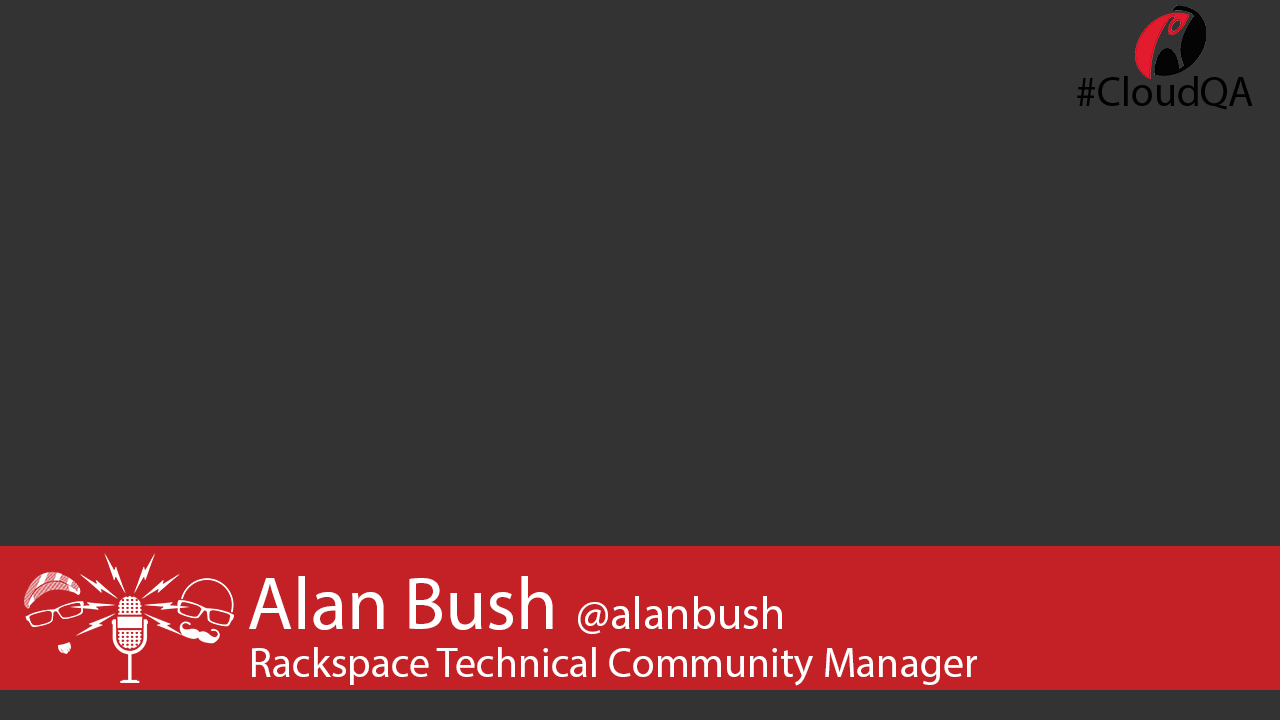
<style>
.page{position:relative;width:1280px;height:720px;background:#333333}
.page>*{position:absolute;margin:0}
.t1{font:41.7px "MyriadPro-Regular";color:#000000}
.t2{font:75px "MyriadPro-Regular";color:#ffffff}
.t3{font:45.8px "MyriadPro-Regular";color:#ffffff}
.t4{font:41.7px "MyriadPro-Regular";color:#ffffff}
</style>
<div class="page">
<p class="t1" style="left:1077px;top:76px;width:176px;height:34px">#CloudQA</p>
<p class="t2" style="left:249px;top:576px;width:533px;height:58px">Alan Bush <span class="t3">@alanbush</span></p>
<p class="t4" style="left:252px;top:647px;width:725px;height:39px">Rackspace Technical Community Manager</p>
</div>
